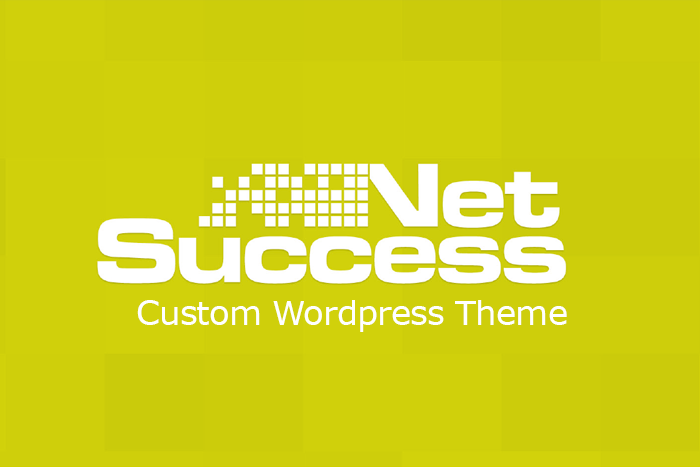
<style>
.page{position:relative;width:700px;height:467px;background:#d0d00b}
.page>*{position:absolute;margin:0}
.t1{font:33.4px "Verdana";letter-spacing:-0.02em;color:#ffffff}
</style>
<div class="page">
<p class="t1" style="left:137px;top:300px;width:430px;height:32px">Custom Wordpress Theme</p>
</div>
